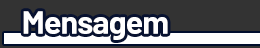
<style>
.page{position:relative;width:260px;height:48px;background:#333333}
.page>*{position:absolute;margin:0}
.t1{font:32px "Barlow-Bold";letter-spacing:-0.025em;color:#ffffff}
</style>
<div class="page">
<p class="t1" style="left:23px;top:11px;width:145px;height:29px">Mensagem</p>
</div>
